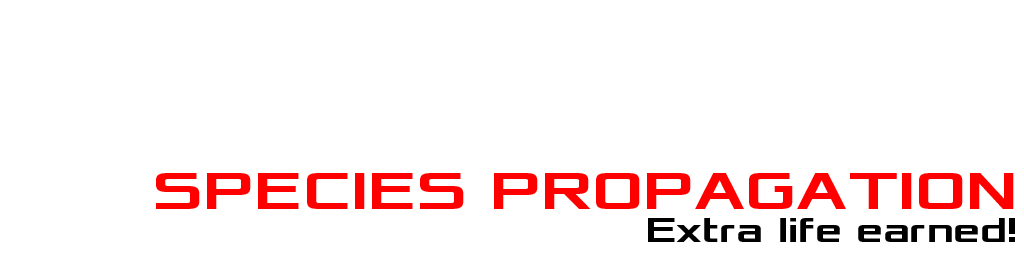
<style>
.page{position:relative;width:1024px;height:256px;background:#ffffff}
.page>*{position:absolute;margin:0}
.t1{font:55px "Xolonium-Bold";color:#ff0000}
.t2{font:36px "Xolonium-Bold";color:#000000}
</style>
<div class="page">
<p class="t1" style="left:156px;top:173px;width:858px;height:36px">SPECIES PROPAGATION</p>
<p class="t2" style="left:648px;top:218px;width:367px;height:24px">Extra life earned!</p>
</div>
